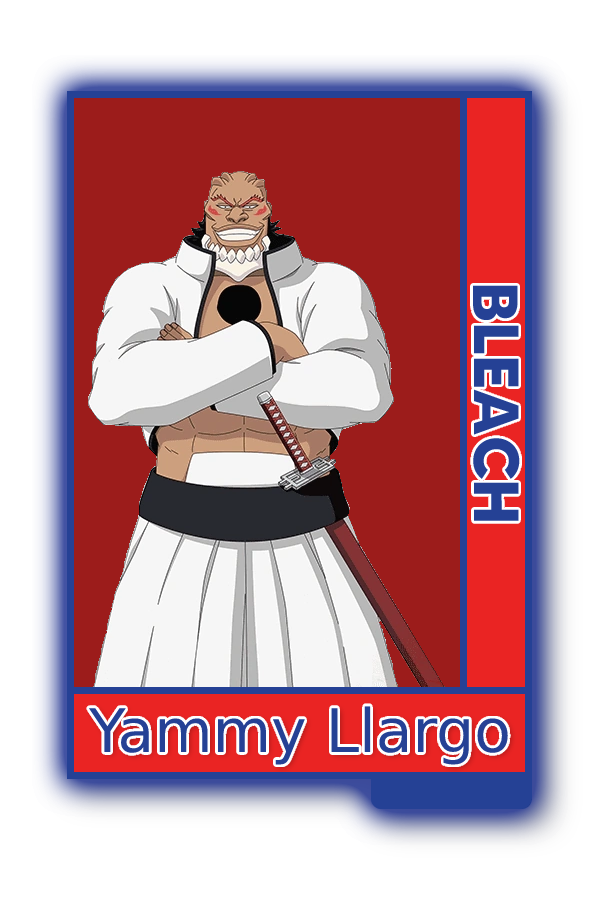
<style>
.page{position:relative;width:600px;height:900px;background:#ffffff}
.page>*{position:absolute;margin:0}
.t1{font:63.6px "MADETOMMY-Bold";color:#254195}
.t2{font:60px "CoolveticaRg-Regular";color:#254195}
</style>
<div class="page">
<p class="t1" style="left:473px;top:285px;width:47px;height:236px;rotate:90deg">BLEACH</p>
<p class="t2" style="left:88px;top:706px;width:420px;height:59px">Yammy Llargo</p>
</div>
